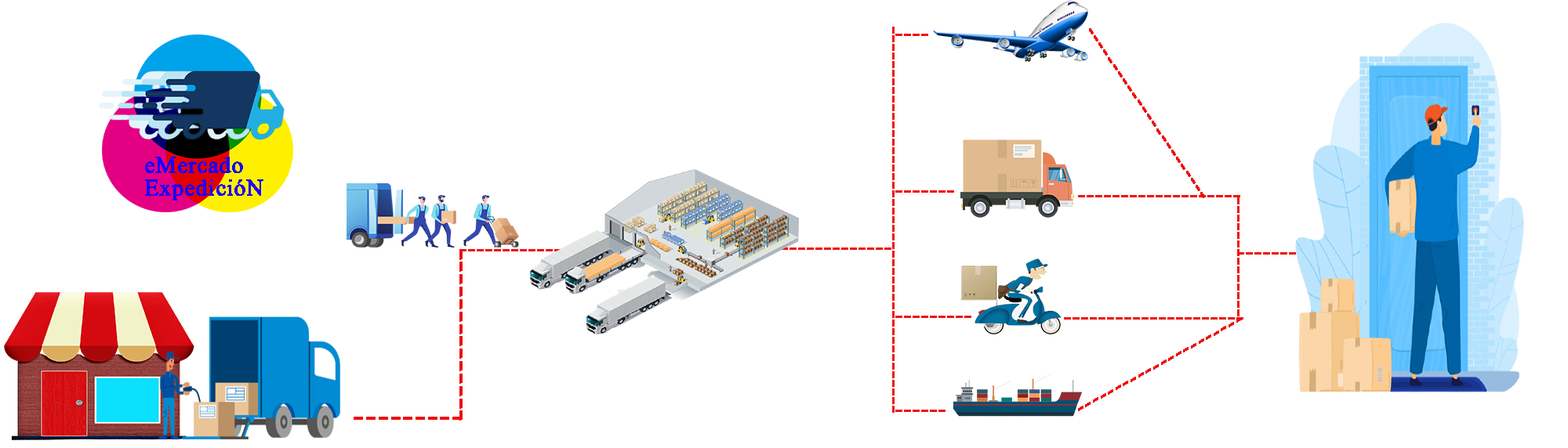
<style>
.page{position:relative;width:1568px;height:448px;background:#ffffff}
.page>*{position:absolute;margin:0}
.t1{font:34.5px "MicrosoftHimalaya";color:#f00c0c;font-weight:bold}
.t2{font:34.5px/31.4px "MicrosoftHimalaya";color:#f00c0c;font-weight:bold}
.t3{font:34.5px/22.6px "MicrosoftHimalaya";color:#1e00ff;font-weight:bold}
.t4{font:34.5px/22.6px "MicrosoftHimalaya";color:#1e00ff;text-transform:uppercase;font-weight:bold}
.t5{font:49.3px "MicrosoftHimalaya";color:#f00c0c;font-weight:bold}
.t6{font:34.5px "MicrosoftHimalaya";font-weight:bold}
</style>
<div class="page">
<p class="t1" style="left:892px;top:27px;width:3px;height:386px;rotate:90deg">---------------------------------------------</p>
<p class="t1" style="left:1089px;top:28px;width:116px;height:170px;rotate:56deg">------------------------</p>
<p class="t2" style="left:895px;top:34px;width:76px;height:378px">----<br><br><br><br><br>-------<br><br><br><br>---------<br><br><br>------</p>
<p class="t3" style="left:145px;top:157px;width:118px;height:44px">eMercado <br>Expedició<span class="t4">n</span></p>
<p class="t1" style="left:1078px;top:195px;width:162px;height:3px">-------------------</p>
<p class="t1" style="left:1237px;top:198px;width:3px;height:119px;rotate:90deg">--------------</p>
<p class="t5" style="left:459px;top:250px;width:4px;height:171px;rotate:-90deg">--------------</p>
<p class="t6" style="left:459px;top:249px;width:206px;height:3px">------------------------</p>
<p class="t6" style="left:703px;top:248px;width:188px;height:2px">----------------------</p>
<p class="t6" style="left:1237px;top:252px;width:137px;height:3px">----------------</p>
<p class="t1" style="left:1064px;top:318px;width:179px;height:2px">---------------------</p>
<p class="t1" style="left:1078px;top:318px;width:164px;height:94px;rotate:-29deg">----------------------</p>
<p class="t5" style="left:354px;top:417px;width:108px;height:3px">---------</p>
</div>
